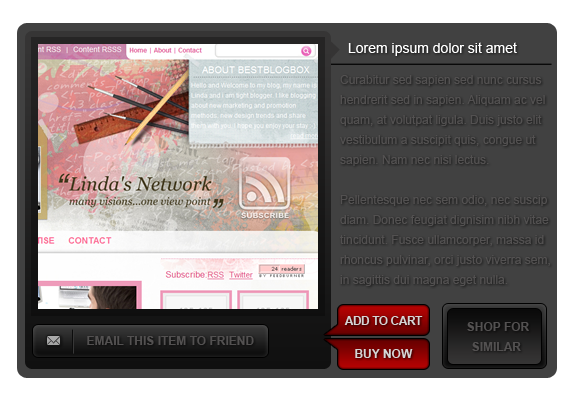
<style>
.page{position:relative;width:577px;height:404px;background:#414141}
.page>*{position:absolute;margin:0}
.t1{font:14px "ArialMT";color:#ffffff}
.t2{font:12px/20px "ArialMT";color:#535151}
.t3{font:12px "Arial-BoldMT";letter-spacing:-0.04em;color:#d5d5d5}
.t4{font:12px/20px "Arial-BoldMT";color:#535151}
.t5{font:12px "Arial-BoldMT";color:#535151}
.t6{font:12px "Arial-BoldMT";color:#d5d5d5}
</style>
<div class="page">
<p class="t1" style="left:348px;top:42px;width:169px;height:14px">Lorem ipsum dolor sit amet</p>
<p class="t2" style="left:340px;top:75px;width:210px;height:211px">Curabitur sed sapien sed nunc cursus<br>hendrerit sed in sapien. Aliquam ac vel<br>quam, at volutpat ligula. Duis justo elit<br>vestibulum a suscipit quis, congue ut<br>sapien. Nam nec nisi lectus.<br><br>Pellentesque nec sem odio, nec suscip<br>diam. Donec feugiat dignisim nibh vitae<br>tincidunt. Fusce ullamcorper, massa id<br>rhoncus pulvinar, orci justo viverra sem,<br>in sagittis dui magna eget nulla.</p>
<p class="t3" style="left:344px;top:316px;width:79px;height:9px">ADD TO CART</p>
<p class="t4" style="left:467px;top:322px;width:62px;height:29px;text-align:center">SHOP FOR<br>SIMILAR</p>
<p class="t5" style="left:87px;top:336px;width:167px;height:9px">EMAIL THIS ITEM TO FRIEND</p>
<p class="t6" style="left:355px;top:349px;width:58px;height:9px">BUY NOW</p>
</div>
